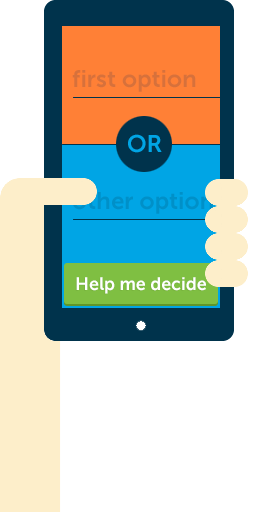
<style>
.page{position:relative;width:256px;height:512px;background:#ffffff}
.page>*{position:absolute;margin:0}
.t1{font:24px "MuseoSans-700";color:#d7713b}
.t2{font:24px "MuseoSans-700";color:#00a5e5}
.t3{font:24px "MuseoSans-700";color:#0090c8}
.t4{font:18px "MuseoSans-700";color:#ffffff}
</style>
<div class="page">
<p class="t1" style="left:72px;top:70px;width:124px;height:22px">first option</p>
<p class="t2" style="left:128px;top:134px;width:34px;height:19px">OR</p>
<p class="t3" style="left:72px;top:192px;width:141px;height:22px">other option</p>
<p class="t4" style="left:76px;top:277px;width:130px;height:17px">Help me decide</p>
</div>
